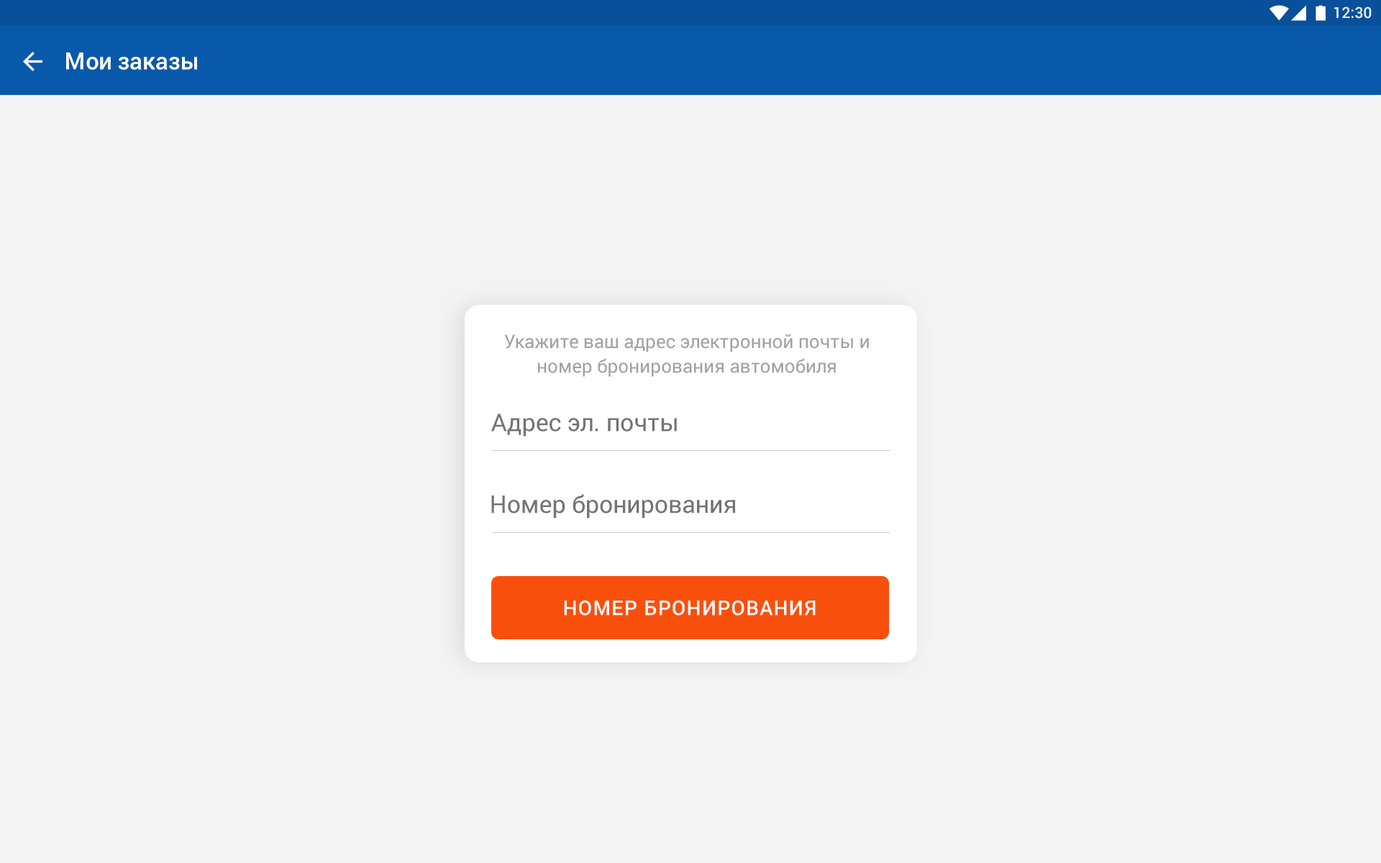
<style>
.page{position:relative;width:1381px;height:863px;background:#f4f4f4}
.page>*{position:absolute;margin:0}
.t1{font:15.1px "Roboto-Medium";color:#e7eef5}
.t2{font:23.6px "Roboto-Medium";color:#ffffff}
.t3{font:18.7px/24.6px "Roboto-Regular";color:#a1a1a1}
.t4{font:24.5px "Roboto-Regular";color:#737373}
.t5{font:20.1px "Roboto-Medium";letter-spacing:0.05em;color:#ffffff;text-transform:uppercase}
</style>
<div class="page">
<p class="t1" style="left:1335px;top:6px;width:37px;height:13px">12:30</p>
<p class="t2" style="left:66px;top:53px;width:131px;height:17px">Мои заказы</p>
<p class="t3" style="left:504px;top:334px;width:365px;height:43px;text-align:center">Укажите ваш адрес электронной почты и номер бронирования автомобиля</p>
<p class="t4" style="left:491px;top:414px;width:186px;height:23px">Адрес эл. почты</p>
<p class="t4" style="left:491px;top:494px;width:244px;height:25px">Номер бронирования</p>
<p class="t5" style="left:564px;top:601px;width:252px;height:15px">Номер бронирования</p>
</div>
